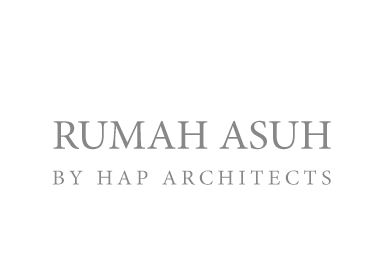
<style>
.page{position:relative;width:386px;height:268px;background:#ffffff}
.page>*{position:absolute;margin:0}
.t1{font:42.3px "MinionPro-Regular";color:#878787}
.t2{font:21.1px "MinionPro-Regular";letter-spacing:0.2em;color:#878787}
</style>
<div class="page">
<p class="t1" style="left:53px;top:120px;width:278px;height:30px">RUMAH ASUH</p>
<p class="t2" style="left:52px;top:170px;width:279px;height:15px">BY HAP ARCHITECTS</p>
</div>
